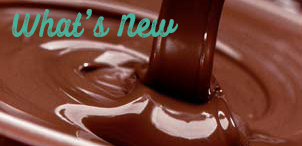
<style>
.page{position:relative;width:302px;height:146px}
.page>*{position:absolute;margin:0}
.t1{font:41.1px "FelishaRough";color:#47b19c}
</style>
<div class="page">
<p class="t1" style="left:12px;top:9px;width:166px;height:29px">What’s New</p>
</div>
